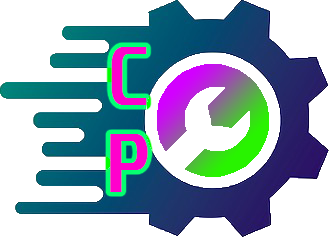
<style>
.page{position:relative;width:329px;height:237px;background:#ffffff}
.page>*{position:absolute;margin:0}
.t1{font:72px "Unispace-Bold";color:#ff00cc}
</style>
<div class="page">
<p class="t1" style="left:110px;top:47px;width:38px;height:145px">C<br>P</p>
</div>
